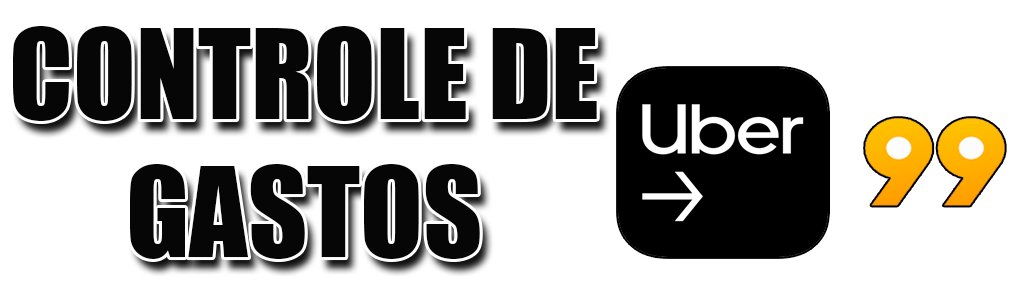
<style>
.page{position:relative;width:1013px;height:295px;background:#ffffff}
.page>*{position:absolute;margin:0}
.t1{font:115px "Impact";color:#070606}
</style>
<div class="page">
<p class="t1" style="left:13px;top:26px;width:584px;height:233px;text-align:center">CONTROLE DE GASTOS</p>
</div>
